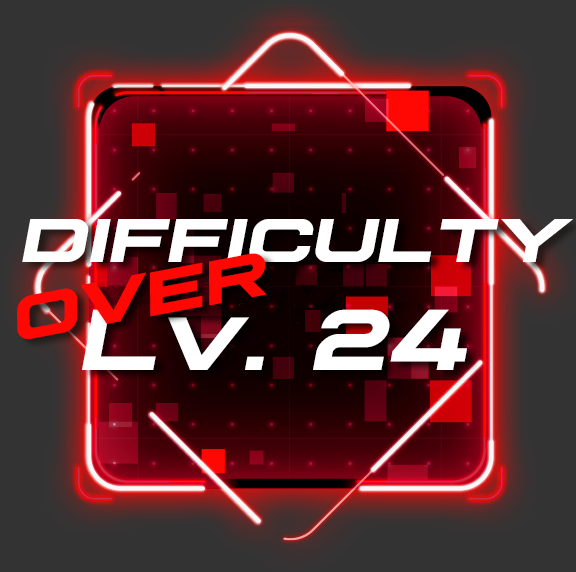
<style>
.page{position:relative;width:576px;height:572px;background:#333333}
.page>*{position:absolute;margin:0}
.t1{font:75px "Plateia-Bold";color:#ffffff}
.t2{font:91.6px "Plateia-Bold";color:#ffffff}
.t3{font:75px "Plateia-Bold";color:#ff0804}
</style>
<div class="page">
<p class="t1" style="left:22px;top:219px;width:552px;height:151px;text-align:center">difficulty<br><span class="t2">Lv. 24</span></p>
<p class="t3" style="left:17px;top:253px;width:250px;height:86px;rotate:-11deg">over</p>
</div>
